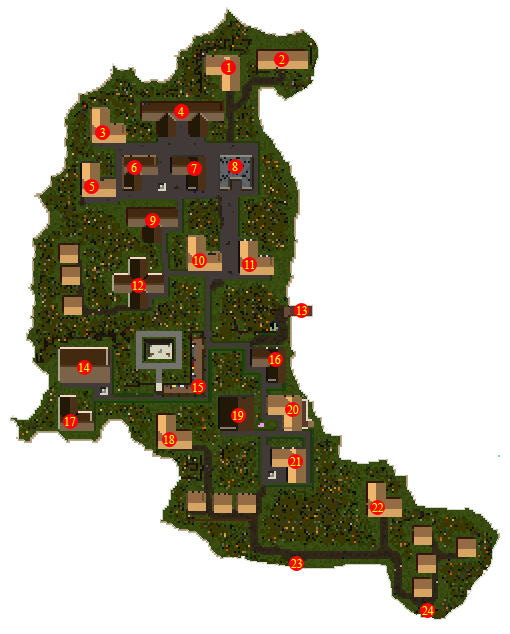
<style>
.page{position:relative;width:510px;height:634px;background:#ffffff}
.page>*{position:absolute;margin:0}
.t1{font:20px "TimesNewRomanPSMT";color:#effe02}
</style>
<div class="page">
<p class="t1" style="left:227px;top:63px;width:4px;height:9px">1</p>
<p class="t1" style="left:279px;top:55px;width:6px;height:9px">2</p>
<p class="t1" style="left:178px;top:107px;width:6px;height:9px">4</p>
<p class="t1" style="left:100px;top:128px;width:6px;height:9px">3</p>
<p class="t1" style="left:131px;top:163px;width:6px;height:9px">6</p>
<p class="t1" style="left:191px;top:164px;width:6px;height:9px">7</p>
<p class="t1" style="left:232px;top:162px;width:6px;height:9px">8</p>
<p class="t1" style="left:89px;top:182px;width:6px;height:9px">5</p>
<p class="t1" style="left:150px;top:216px;width:6px;height:9px">9</p>
<p class="t1" style="left:194px;top:256px;width:11px;height:9px">10</p>
<p class="t1" style="left:245px;top:260px;width:10px;height:9px">11</p>
<p class="t1" style="left:133px;top:281px;width:11px;height:9px">12</p>
<p class="t1" style="left:297px;top:306px;width:10px;height:9px">13</p>
<p class="t1" style="left:79px;top:363px;width:11px;height:9px">14</p>
<p class="t1" style="left:270px;top:355px;width:11px;height:9px">16</p>
<p class="t1" style="left:193px;top:383px;width:10px;height:9px">15</p>
<p class="t1" style="left:233px;top:411px;width:11px;height:9px">19</p>
<p class="t1" style="left:287px;top:405px;width:12px;height:9px">20</p>
<p class="t1" style="left:65px;top:417px;width:11px;height:9px">17</p>
<p class="t1" style="left:164px;top:435px;width:11px;height:9px">18</p>
<p class="t1" style="left:290px;top:457px;width:11px;height:9px">21</p>
<p class="t1" style="left:372px;top:503px;width:12px;height:9px">22</p>
<p class="t1" style="left:291px;top:559px;width:11px;height:9px">23</p>
<p class="t1" style="left:422px;top:606px;width:12px;height:9px">24</p>
</div>
